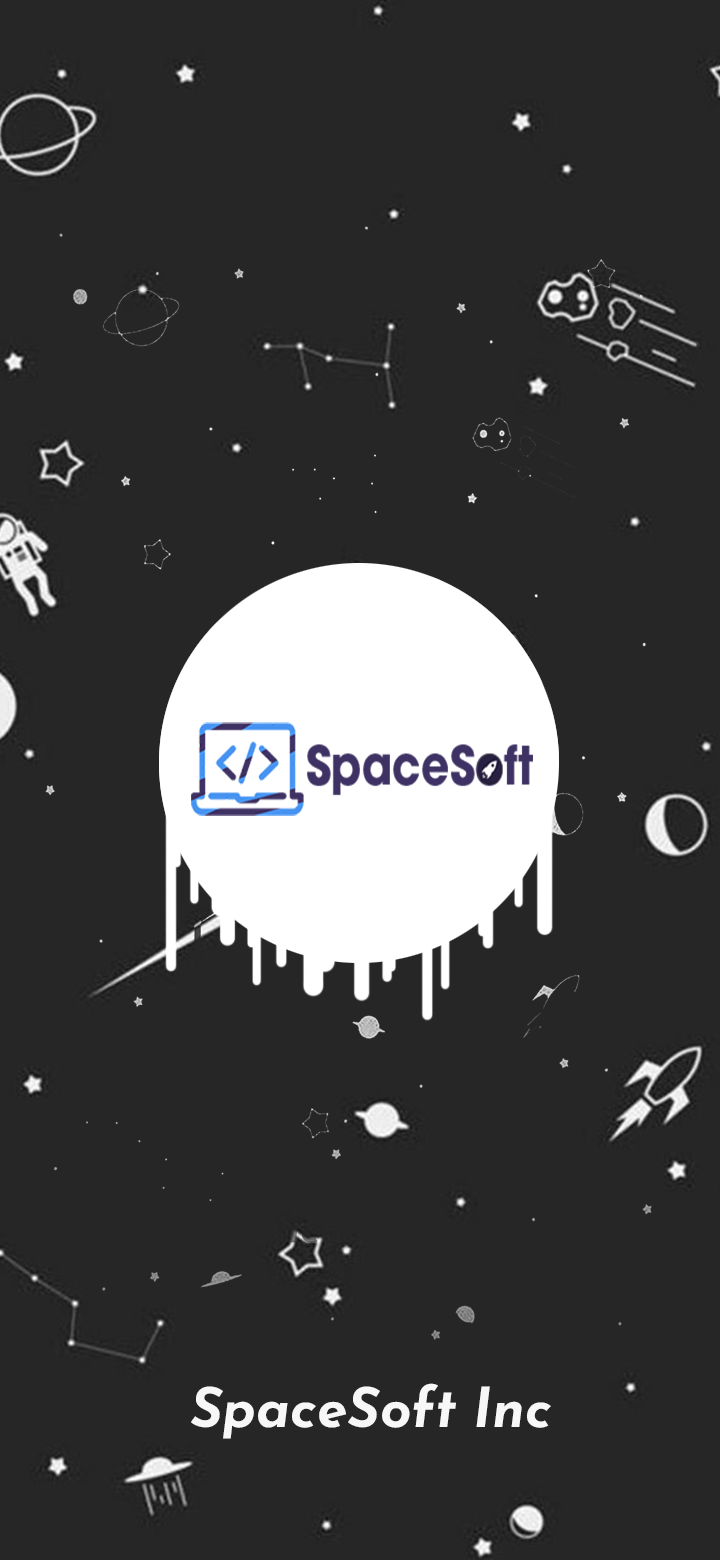
<style>
.page{position:relative;width:720px;height:1560px;background:#262626}
.page>*{position:absolute;margin:0}
.t1{font:55px "JosefinSans-BoldItalic";color:#f7f7f7}
</style>
<div class="page">
<p class="t1" style="left:191px;top:1383px;width:360px;height:56px">SpaceSoft Inc</p>
</div>
